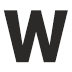
<style>
.page{position:relative;width:72px;height:72px;background:#ffffff}
.page>*{position:absolute;margin:0}
.t1{font:72px "Industry-Black";color:#2b2a28;text-transform:uppercase}
</style>
<div class="page">
<p class="t1" style="left:3px;top:10px;width:65px;height:53px">W</p>
</div>
